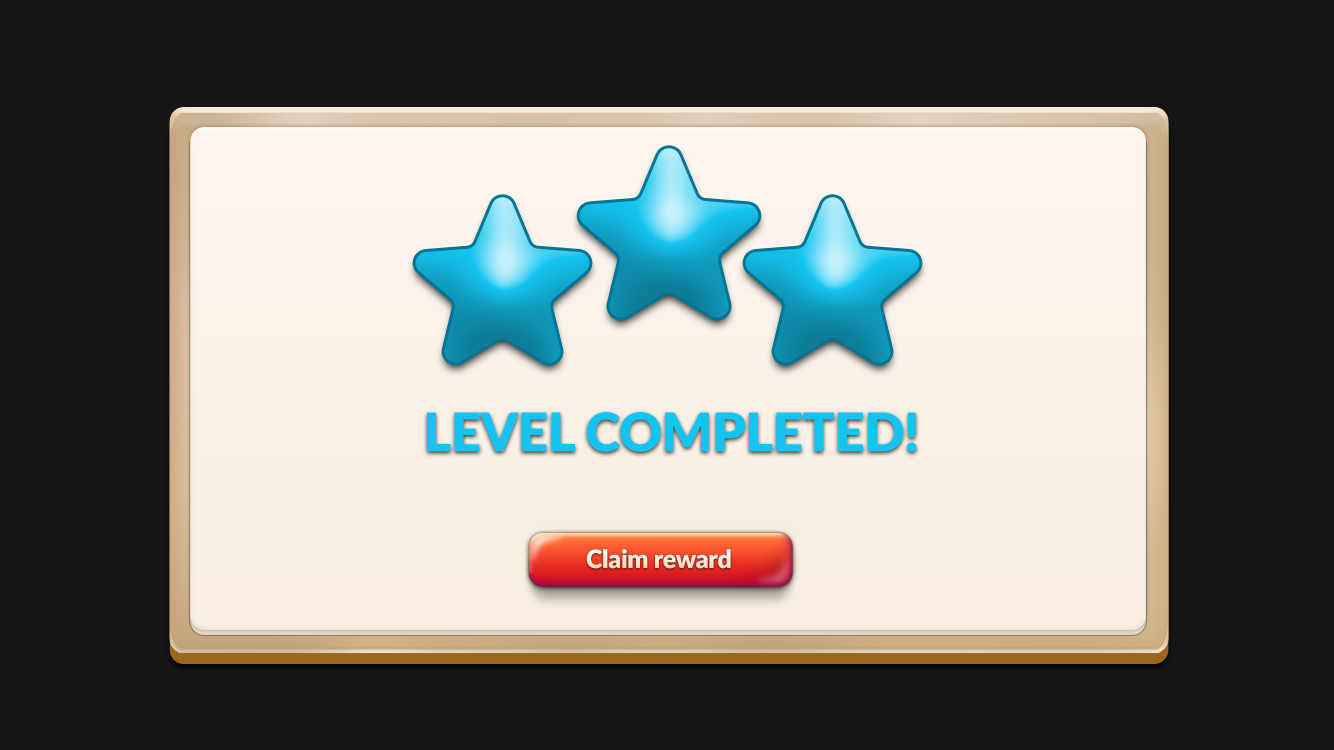
<style>
.page{position:relative;width:1334px;height:750px;background:#161515}
.page>*{position:absolute;margin:0}
.t1{font:53.1px "Lato-Black";letter-spacing:-0.01em;color:#14c4f0}
.t2{font:24.9px "Lato-Black";letter-spacing:-0.01em;color:#f8ead6}
</style>
<div class="page">
<p class="t1" style="left:427px;top:412px;width:490px;height:40px">LEVEL COMPLETED!</p>
<p class="t2" style="left:586px;top:549px;width:145px;height:20px">Claim reward</p>
</div>
